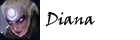
<style>
.page{position:relative;width:140px;height:40px;background:#ffffff}
.page>*{position:absolute;margin:0}
.t1{font:12px "VinerHandITC";color:#000000}
</style>
<div class="page">
<p class="t1" style="left:45px;top:11px;width:50px;height:16px">Diana</p>
</div>
